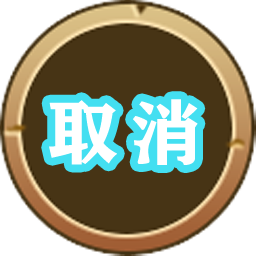
<style>
.page{position:relative;width:256px;height:256px;background:#473415}
.page>*{position:absolute;margin:0}
.t1{font:72px "FZCHSJW--GB1-0";letter-spacing:0.16em;color:#ffffff}
</style>
<div class="page">
<p class="t1" style="left:49px;top:99px;width:149px;height:66px">取消</p>
</div>
